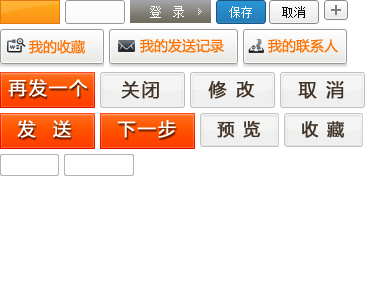
<style>
.page{position:relative;width:369px;height:300px;background:#ffffff}
.page>*{position:absolute;margin:0}
.t1{font:12px "SimSun";letter-spacing:0.2em;color:#ffffff}
.t2{font:14px "MicrosoftYaHei";color:#fd7305}
.t3{font:18px "MicrosoftYaHei";letter-spacing:0.1em;color:#ffffff;font-weight:bold}
.t4{font:18px "MicrosoftYaHei";letter-spacing:0.1em;color:#413328;font-weight:bold}
</style>
<div class="page">
<p class="t1" style="left:150px;top:6px;width:34px;height:12px">登 录</p>
<p class="t2" style="left:29px;top:40px;width:56px;height:14px">我的收藏</p>
<p class="t2" style="left:140px;top:39px;width:84px;height:14px">我的发送记录</p>
<p class="t2" style="left:268px;top:39px;width:70px;height:14px">我的联系人</p>
<p class="t3" style="left:8px;top:79px;width:80px;height:18px">再发一个</p>
<p class="t4" style="left:121px;top:81px;width:38px;height:18px">关闭</p>
<p class="t4" style="left:208px;top:81px;width:47px;height:18px">修 改</p>
<p class="t4" style="left:298px;top:81px;width:46px;height:18px">取 消</p>
<p class="t3" style="left:17px;top:120px;width:54px;height:18px">发  送</p>
<p class="t3" style="left:117px;top:120px;width:59px;height:18px">下一步</p>
</div>
